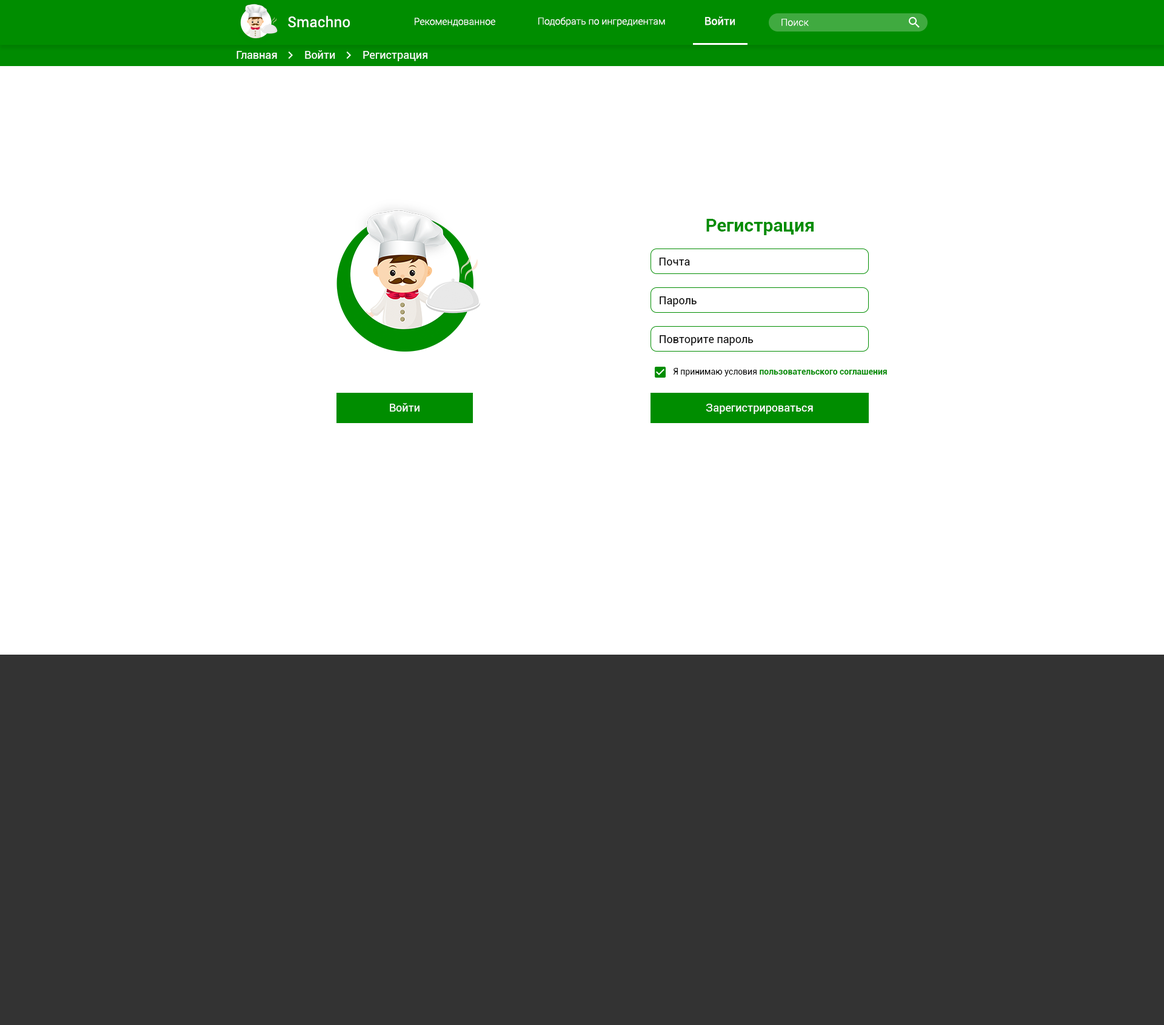
<style>
.page{position:relative;width:1164px;height:1025px;background:#ffffff}
.page>*{position:absolute;margin:0}
.t1{font:14.5px "Roboto-Regular";letter-spacing:0.01em;color:#ffffff}
.t2{font:9.7px "Roboto-Light";color:#ffffff}
.t3{font:10.9px "Roboto-Regular";color:#ffffff}
.t4{font:18.2px "Roboto-Bold";color:#008d00}
.t5{font:10.9px "Roboto-Regular";color:#000000}
.t6{font:8.5px "Roboto-Bold";color:#008d00}
.t7{font:8.5px "Roboto-Regular";color:#000000}
</style>
<div class="page">
<p class="t1" style="left:288px;top:16px;width:62px;height:11px">Smachno</p>
<p class="t2" style="left:415px;top:18px;width:80px;height:9px">Рекомендованное</p>
<p class="t2" style="left:538px;top:17px;width:127px;height:10px">Подобрать по ингредиентам</p>
<p class="t3" style="left:705px;top:16px;width:30px;height:9px">Войти</p>
<p class="t2" style="left:781px;top:19px;width:27px;height:7px">Поиск</p>
<p class="t3" style="left:236px;top:51px;width:41px;height:8px">Главная</p>
<p class="t3" style="left:305px;top:50px;width:30px;height:9px">Войти</p>
<p class="t3" style="left:363px;top:51px;width:64px;height:10px">Регистрация</p>
<p class="t4" style="left:706px;top:219px;width:107px;height:16px">Регистрация</p>
<p class="t5" style="left:659px;top:258px;width:31px;height:7px">Почта</p>
<p class="t5" style="left:659px;top:296px;width:37px;height:11px">Пароль</p>
<p class="t5" style="left:659px;top:335px;width:94px;height:10px">Повторите пароль</p>
<p class="t6" style="left:673px;top:368px;width:214px;height:8px"><span class="t7">Я принимаю условия </span>пользовательского соглашения</p>
<p class="t3" style="left:390px;top:403px;width:29px;height:8px">Войти</p>
<p class="t3" style="left:706px;top:404px;width:107px;height:10px">Зарегистрироваться</p>
</div>
